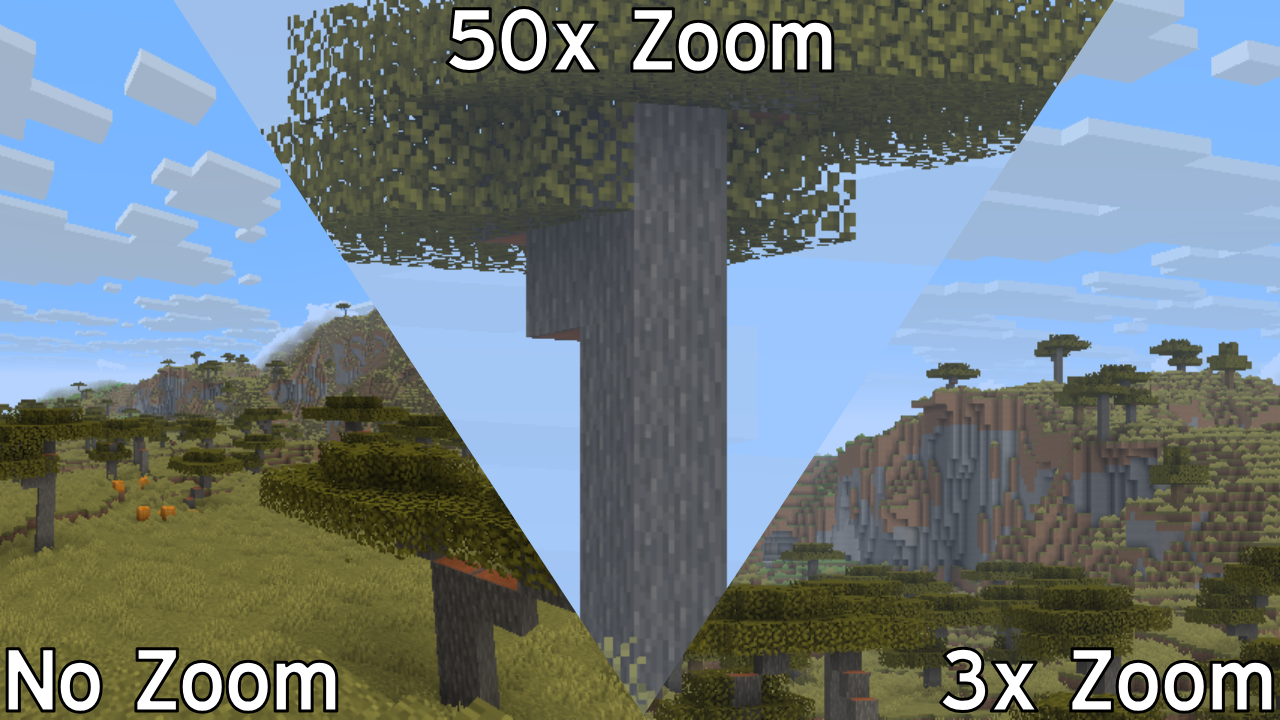
<style>
.page{position:relative;width:1280px;height:720px}
.page>*{position:absolute;margin:0}
.t1{font:90px "ExpresswayRg-Bold"}
</style>
<div class="page">
<p class="t1" style="left:444px;top:5px;width:391px;height:70px">50x Zoom</p>
<p class="t1" style="left:5px;top:646px;width:334px;height:69px">No Zoom</p>
<p class="t1" style="left:938px;top:646px;width:337px;height:69px">3x Zoom</p>
</div>
